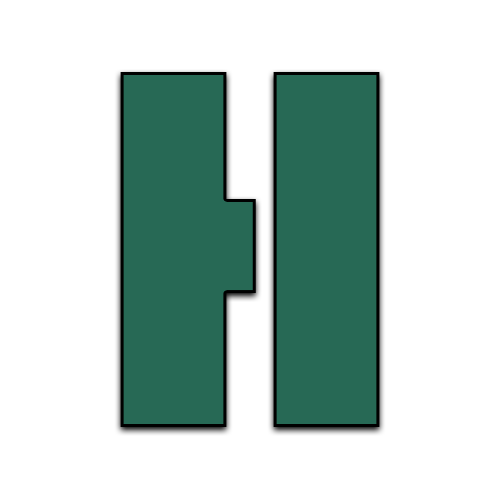
<style>
.page{position:relative;width:500px;height:500px;background:#ffffff}
.page>*{position:absolute;margin:0}
.t1{font:533.3px "Bauhaus93";color:#276955}
</style>
<div class="page">
<p class="t1" style="left:120px;top:72px;width:260px;height:355px">H</p>
</div>
